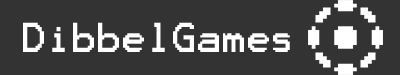
<style>
.page{position:relative;width:400px;height:75px;background:#333333}
.page>*{position:absolute;margin:0}
.t1{font:33.3px "Terminal";color:#ffffff}
</style>
<div class="page">
<p class="t1" style="left:23px;top:22px;width:267px;height:30px">DibbelGames</p>
</div>
